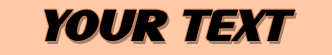
<style>
.page{position:relative;width:332px;height:55px;background:#ffc9a8}
.page>*{position:absolute;margin:0}
.t1{font:47px "SFIntellivisedBoldItalic";color:#000000}
</style>
<div class="page">
<p class="t1" style="left:44px;top:9px;width:251px;height:32px">YOUR TEXT</p>
</div>
